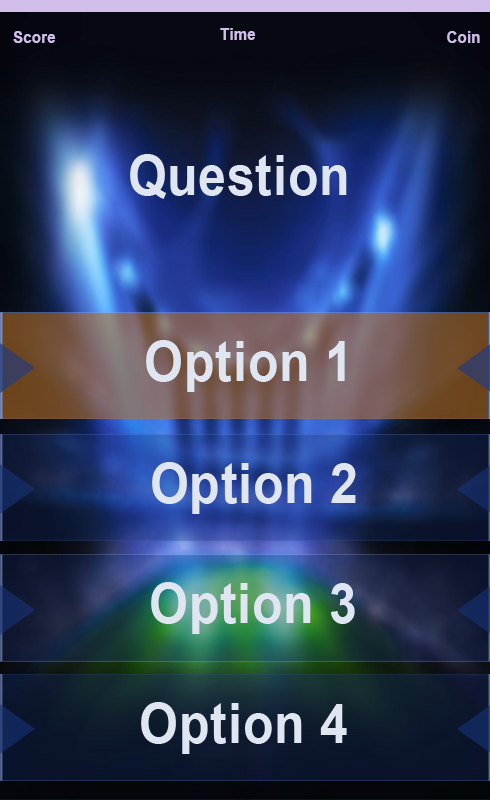
<style>
.page{position:relative;width:490px;height:800px}
.page>*{position:absolute;margin:0}
.t1{font:16.7px "Arial-BoldMT";letter-spacing:0.02em;color:#d2beeb;scale:0.89 1}
.t2{font:55.5px "Arial-BoldMT";letter-spacing:0.02em;color:#dfe6f2;scale:0.89 1}
</style>
<div class="page">
<p class="t1" style="left:220px;top:28px;width:36px;height:12px">Time</p>
<p class="t1" style="left:13px;top:31px;width:43px;height:12px">Score</p>
<p class="t1" style="left:447px;top:31px;width:33px;height:12px">Coin</p>
<p class="t2" style="left:130px;top:154px;width:217px;height:45px">Question</p>
<p class="t2" style="left:146px;top:340px;width:199px;height:52px">Option 1</p>
<p class="t2" style="left:152px;top:462px;width:204px;height:52px">Option 2</p>
<p class="t2" style="left:151px;top:582px;width:204px;height:52px">Option 3</p>
<p class="t2" style="left:141px;top:702px;width:206px;height:52px">Option 4</p>
</div>
